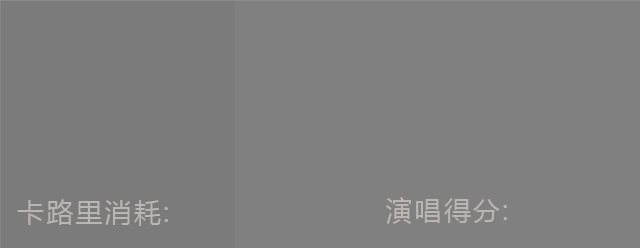
<style>
.page{position:relative;width:640px;height:248px;background:#808080}
.page>*{position:absolute;margin:0}
.t1{font:27px "MicrosoftYaHei";letter-spacing:0.08em;color:#bbb5b4}
.t2{font:27px "MicrosoftYaHei";color:#bbb5b4}
.t3{font:27px "MicrosoftYaHei";letter-spacing:0.08em;color:#bbb6b4}
.t4{font:27px "MicrosoftYaHei";color:#bbb6b4}
</style>
<div class="page">
<p class="t1" style="left:386px;top:197px;width:121px;height:27px">演唱得分<span class="t2">:</span></p>
<p class="t3" style="left:17px;top:199px;width:151px;height:27px">卡路里消耗<span class="t4">:</span></p>
</div>
